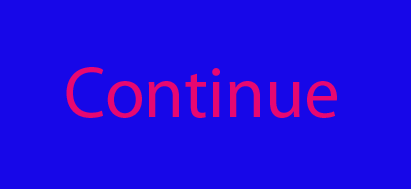
<style>
.page{position:relative;width:411px;height:189px;background:#1707e8}
.page>*{position:absolute;margin:0}
.t1{font:72px "MyriadPro-Regular";color:#e80771}
</style>
<div class="page">
<p class="t1" style="left:66px;top:67px;width:271px;height:51px">Continue</p>
</div>
